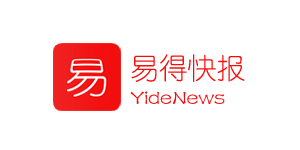
<style>
.page{position:relative;width:300px;height:150px;background:#ffffff}
.page>*{position:absolute;margin:0}
.t1{font:28.8px "YouYuan";color:#f80d0d}
.t2{font:21.5px "FZSTK--GBK1-0";color:#f80d0d}
</style>
<div class="page">
<p class="t1" style="left:131px;top:54px;width:114px;height:28px">易得快报</p>
<p class="t2" style="left:130px;top:91px;width:95px;height:13px">YideNews</p>
</div>
